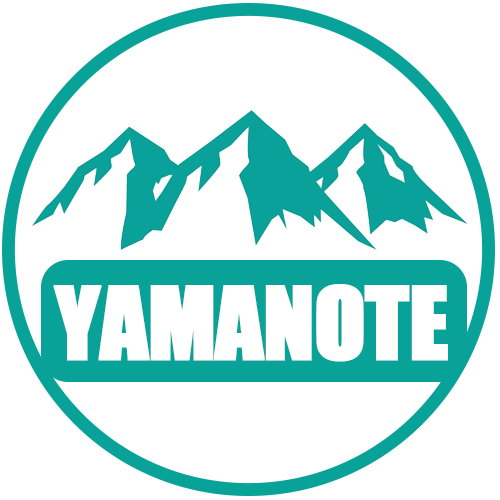
<style>
.page{position:relative;width:500px;height:500px;background:#ffffff}
.page>*{position:absolute;margin:0}
.t1{font:93.7px "Impact";letter-spacing:-0.025em;color:#ffffff;font-weight:bold}
</style>
<div class="page">
<p class="t1" style="left:53px;top:284px;width:395px;height:78px">YAMANOTE</p>
</div>
